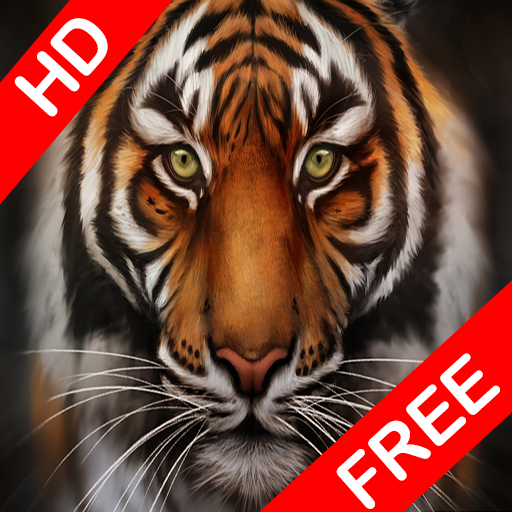
<style>
.page{position:relative;width:512px;height:512px}
.page>*{position:absolute;margin:0}
.t1{font:72.6px "ArialRoundedMTBold";letter-spacing:-0.025em;color:#ffffff}
.t2{font:72.7px "ArialRoundedMTBold";letter-spacing:-0.025em;color:#ffffff}
</style>
<div class="page">
<p class="t1" style="left:14px;top:18px;width:94px;height:99px;rotate:-49deg">HD</p>
<p class="t2" style="left:336px;top:353px;width:164px;height:156px;rotate:-42deg">FREE</p>
</div>
